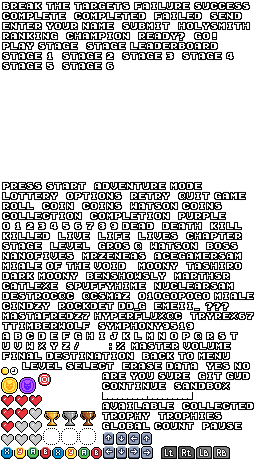
<style>
.page{position:relative;width:256px;height:460px;background:#ffffff}
.page>*{position:absolute;margin:0}
.t1{font:8px/10px "Early-GameBoy";color:#ffffff;font-variant:small-caps}
.t2{font:8px/10px "MyriadPro-Regular";color:#ffffff;font-variant:small-caps}
</style>
<div class="page">
<p class="t1" style="left:3px;top:3px;width:246px;height:66px">BREAK THE TARGETS FAILURE SUCCESS<br>COMPLETE  COMPLETED  FAILED  SEND<br>ENTER YOUR NAME  SUBMIT  HOLYSMITH<br>RANKING  CHAMPION  READY?  GO!<br>PLAY STAGE  STAGE LEADERBOARD<br>STAGE 1  STAGE 2  STAGE 3  STAGE 4<br>STAGE 5  STAGE 6</p>
<p class="t1" style="left:3px;top:183px;width:250px;height:246px">PRESS START  ADVENTURE MODE<br>LOTTERY  OPTIONS  RETRY  QUIT GAME<br>ROLL  COIN  COINS  WATSON COINS<br>COLLECTION  COMPLETION  PURPLE<br>0 1 2 3 4 5 6 7 8 9 DEAD  DEATH  KILL<br>KILLED  LIVE  LIFE  LIVES  CHAPTER<br>STAGE  LEVEL  GROS Q  WATSON  BOSS<br>NANOFIVE5  MRZENEAS  ACEGAMERSAM<br>MIALE OF THE VOID   MOONY  TASHIRO<br>DARK MOONY  BENSHOWSLY  MARTHSR<br>CATLEXE  SPUFFYHIME  NUCLEARSAM<br>DESTROCQC  QCSMAZ  01OGOPOGO MIALE<br>CINDZY  ROCKDET DD<span class="t2">_</span>G  EMEII<span class="t2">_</span>  ???<br>MASTAFREDZ7 HYPERFLUXQC  TRYREX67<br>TTIMBERWOLF  SYMPHONY9519<br>A B C D E F G H I J K L M N O P Q R S T<br>U V W X Y Z <span class="t2">/                                </span>MASTER VOLUME<br>FINAL DESTINATION  BACK TO MENU<br>     LEVEL SELECT  ERASE DATA  YES NO<br>                         ARE YOU SURE  GIT GUD<br>                         CONTINUE  SANDBOX<br><br>                         AVAILABLE  COLLECTED<br>                         TROPHY  TROPHIES<br>                         GLOBAL COUNT  PAUSE</p>
</div>
